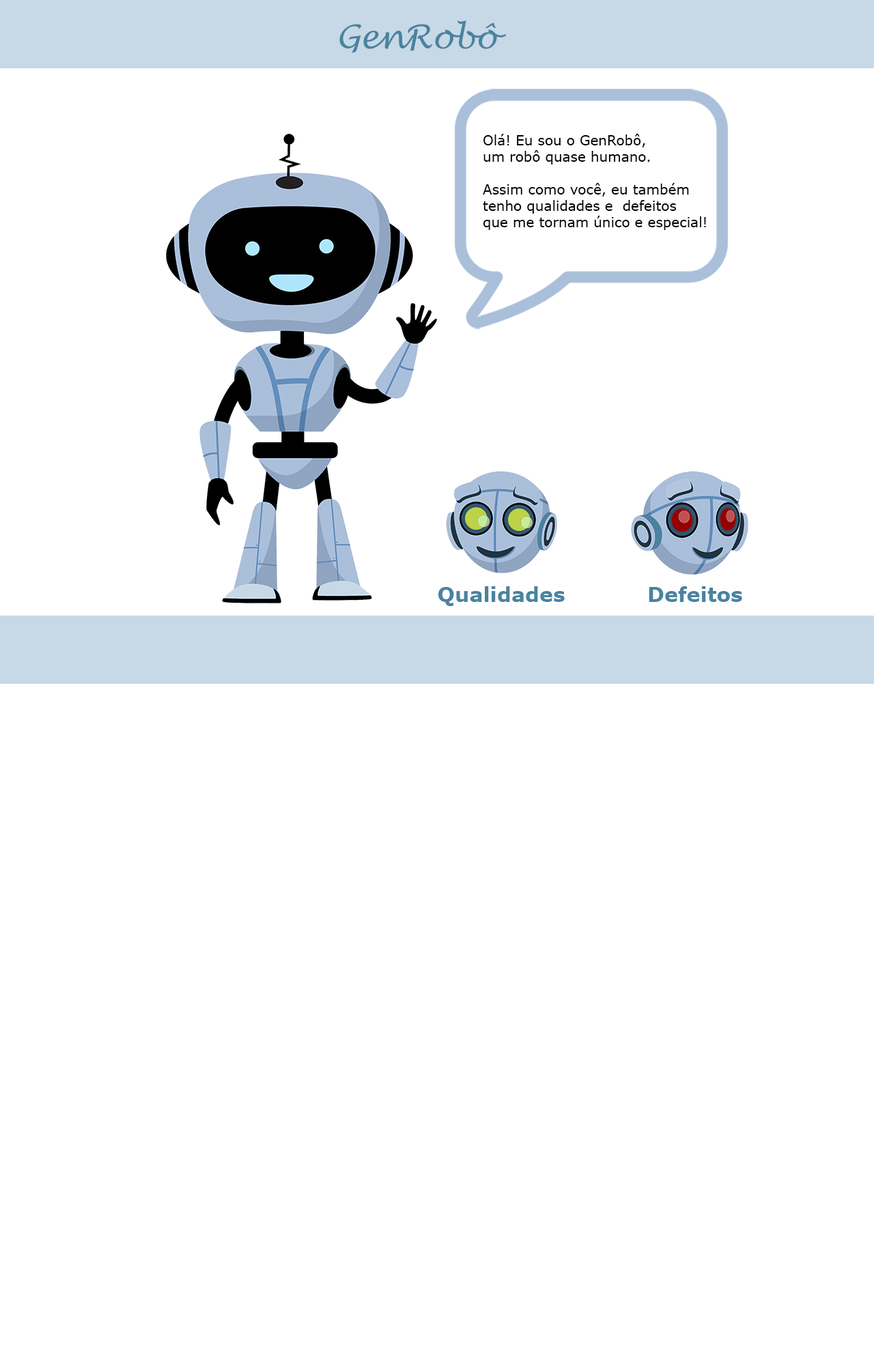
<style>
.page{position:relative;width:874px;height:1365px;background:#ffffff}
.page>*{position:absolute;margin:0}
.t1{font:32.8px "LucidaHandwriting-Italic";color:#49829f}
.t2{font:13.6px "Verdana";color:#000000}
.t3{font:20.5px "Verdana-Bold";color:#4a83a0}
</style>
<div class="page">
<p class="t1" style="left:339px;top:20px;width:167px;height:33px">GenRobô</p>
<p class="t2" style="left:483px;top:134px;width:223px;height:96px">Olá! Eu sou o GenRobô,<br>um robô quase humano.<br><br>Assim como você, eu também <br>tenho qualidades e  defeitos <br>que me tornam único e especial!</p>
<p class="t3" style="left:438px;top:586px;width:126px;height:20px">Qualidades</p>
<p class="t3" style="left:648px;top:586px;width:94px;height:16px">Defeitos</p>
</div>
